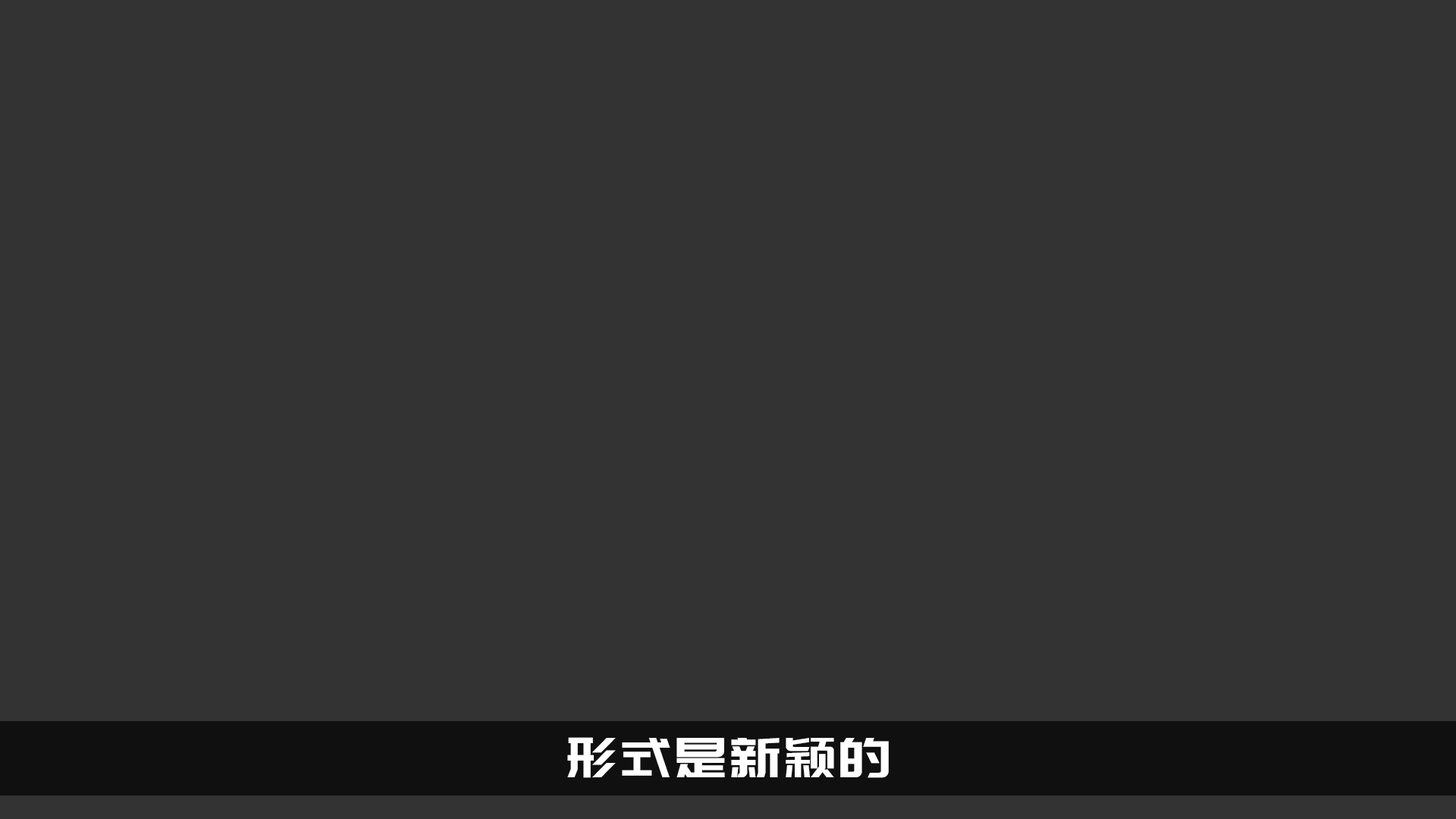
<style>
.page{position:relative;width:1456px;height:819px;background:#333333}
.page>*{position:absolute;margin:0}
.t1{font:54.6px "PangMenZhengDao-3";color:#ffffff}
</style>
<div class="page">
<p class="t1" style="left:567px;top:737px;width:322px;height:41px">形式是新颖的</p>
</div>
